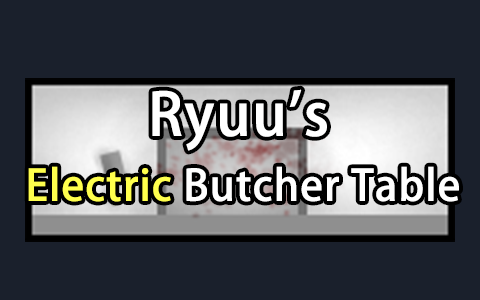
<style>
.page{position:relative;width:480px;height:300px;background:#1a202c}
.page>*{position:absolute;margin:0}
.t1{font:58px "AdobeHeitiStd-Regular";color:#ffffff;font-weight:bold}
.t2{font:42px "AdobeHeitiStd-Regular";color:#ffffff;font-weight:bold}
.t3{font:42px "AdobeHeitiStd-Regular";color:#ffff4d;font-weight:bold}
</style>
<div class="page">
<p class="t1" style="left:152px;top:89px;width:175px;height:62px">Ryuu's</p>
<p class="t2" style="left:28px;top:166px;width:431px;height:36px"><span class="t3">Electric</span> Butcher Table</p>
</div>
